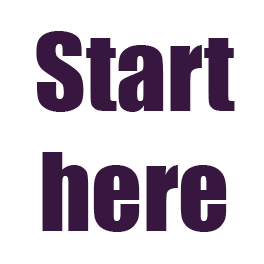
<style>
.page{position:relative;width:264px;height:264px;background:#ffffff}
.page>*{position:absolute;margin:0}
.t1{font:100px "Impact";color:#371640}
</style>
<div class="page">
<p class="t1" style="left:36px;top:31px;width:199px;height:201px;text-align:center">Start<br>here</p>
</div>
